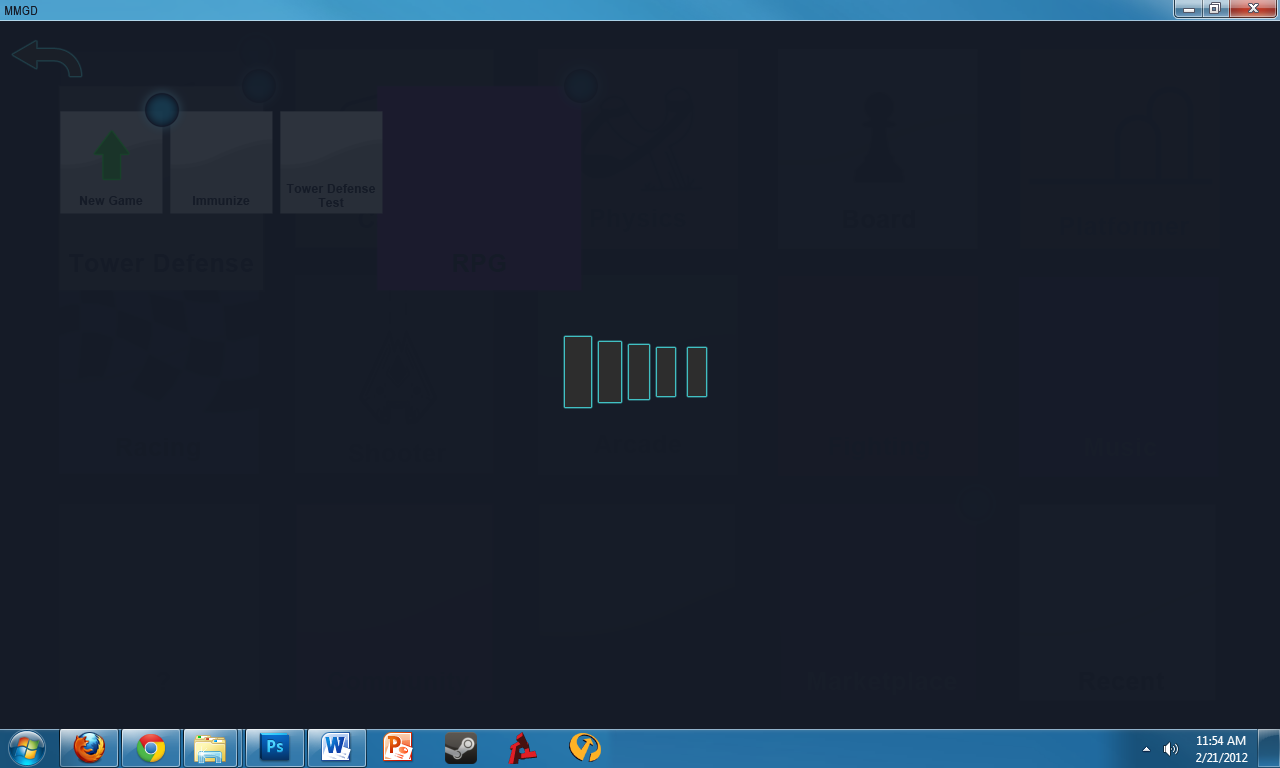
<style>
.page{position:relative;width:1280px;height:768px;background:#151b27}
.page>*{position:absolute;margin:0}
.t1{font:12px "ArialNarrow";letter-spacing:0.05em;color:#151b27}
.t2{font:12px "Arial-BoldMT";letter-spacing:0.025em;color:#151b27}
.t3{font:25px "Arial-BoldMT";letter-spacing:0.025em;color:#151b27}
</style>
<div class="page">
<p class="t1" style="left:5px;top:6px;width:33px;height:9px">MMGD</p>
<p class="t2" style="left:286px;top:184px;width:90px;height:23px;text-align:center">Tower Defense<br>Test</p>
<p class="t2" style="left:79px;top:196px;width:64px;height:9px">New Game</p>
<p class="t2" style="left:193px;top:196px;width:57px;height:9px">Immunize</p>
<p class="t3" style="left:453px;top:254px;width:53px;height:18px">RPG</p>
</div>
